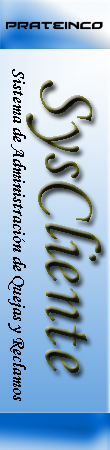
<style>
.page{position:relative;width:110px;height:450px}
.page>*{position:absolute;margin:0}
.t1{font:18.7px "MonotypeCorsiva";color:#000000}
.t2{font:80px "MonotypeCorsiva"}
</style>
<div class="page">
<p class="t1" style="left:8px;top:69px;width:18px;height:332px;rotate:90deg">Sistema de Administración de Quejas y Reclamos</p>
<p class="t2" style="left:26px;top:80px;width:75px;height:293px;rotate:90deg">SysCliente</p>
</div>
